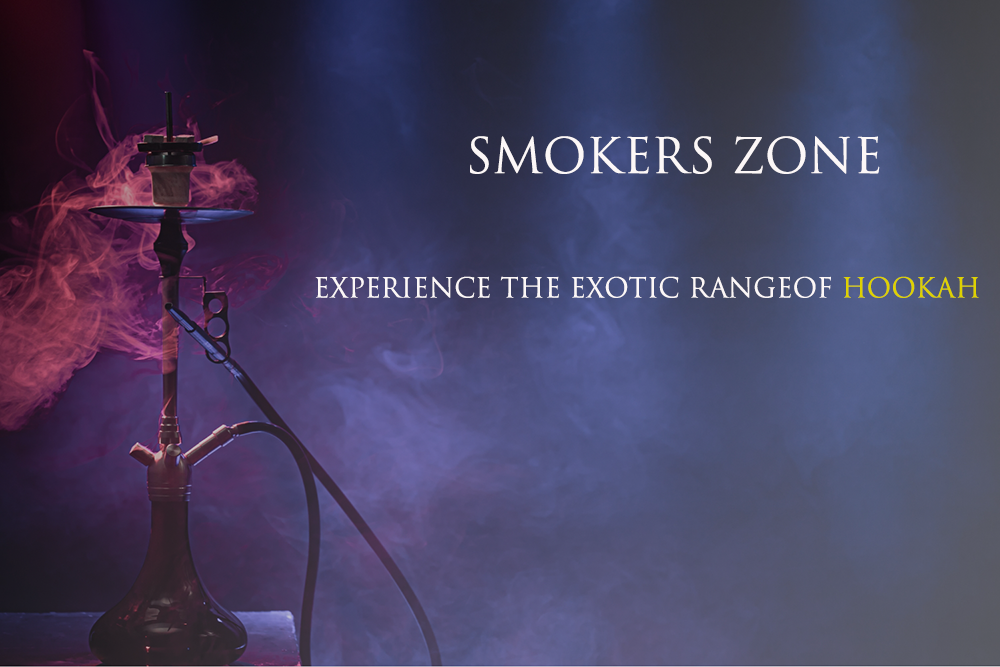
<style>
.page{position:relative;width:1000px;height:667px}
.page>*{position:absolute;margin:0}
.t1{font:48px "TrajanPro3-Regular";color:#fcf7f7}
.t2{font:26.9px "TrajanPro3-Regular";color:#fcf7f7}
.t3{font:26.9px "TrajanPro3-Regular";color:#dfd200}
</style>
<div class="page">
<p class="t1" style="left:470px;top:136px;width:410px;height:38px">SMOKERS ZONE</p>
<p class="t2" style="left:315px;top:276px;width:664px;height:22px">EXPERIENCE THE EXOTIC RANGEOF <span class="t3">HOOKAH</span></p>
</div>
